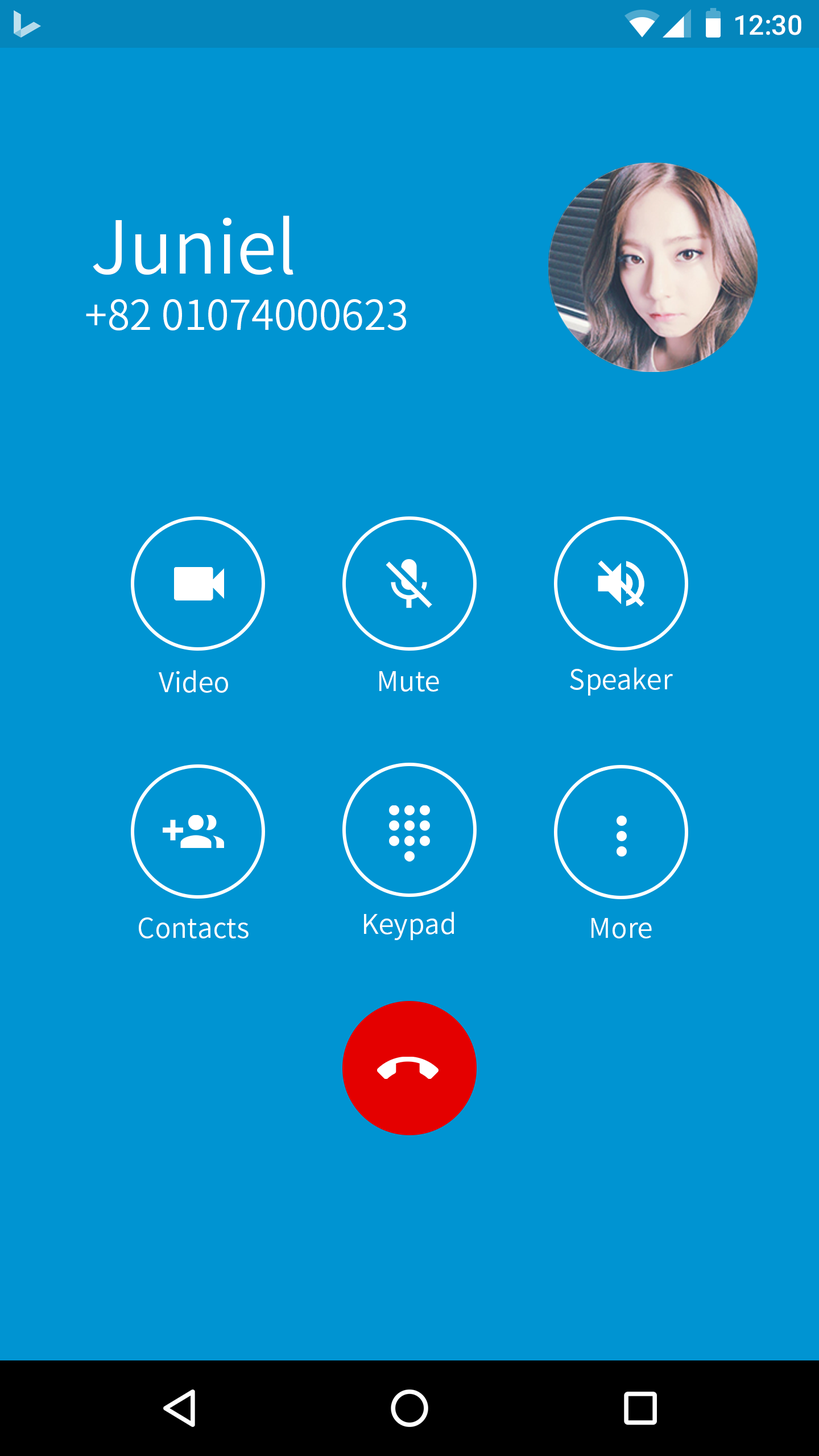
<style>
.page{position:relative;width:819px;height:1456px;background:#0094d2}
.page>*{position:absolute;margin:0}
.t1{font:27.3px "Roboto-Medium";color:#ffffff}
.t2{font:72.8px "NotoSansCJKkr-DemiLight";color:#ffffff}
.t3{font:40.9px "NotoSansCJKkr-DemiLight";color:#ffffff}
.t4{font:27.3px "NotoSansCJKkr-DemiLight";color:#ffffff}
</style>
<div class="page">
<p class="t1" style="left:735px;top:15px;width:66px;height:20px">12:30</p>
<p class="t2" style="left:93px;top:216px;width:200px;height:59px">Juniel</p>
<p class="t3" style="left:86px;top:299px;width:320px;height:31px">+82 01074000623</p>
<p class="t4" style="left:159px;top:670px;width:69px;height:23px">Video</p>
<p class="t4" style="left:379px;top:671px;width:60px;height:21px">Mute</p>
<p class="t4" style="left:570px;top:667px;width:103px;height:29px">Speaker</p>
<p class="t4" style="left:139px;top:917px;width:110px;height:21px">Contacts</p>
<p class="t4" style="left:364px;top:912px;width:90px;height:28px">Keypad</p>
<p class="t4" style="left:591px;top:918px;width:61px;height:20px">More</p>
</div>
